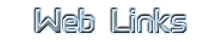
<style>
.page{position:relative;width:219px;height:42px;background:#ffffff}
.page>*{position:absolute;margin:0}
.t1{font:30px "PerfectPixel"}
</style>
<div class="page">
<p class="t1" style="left:35px;top:9px;width:152px;height:24px">Web Links</p>
</div>
